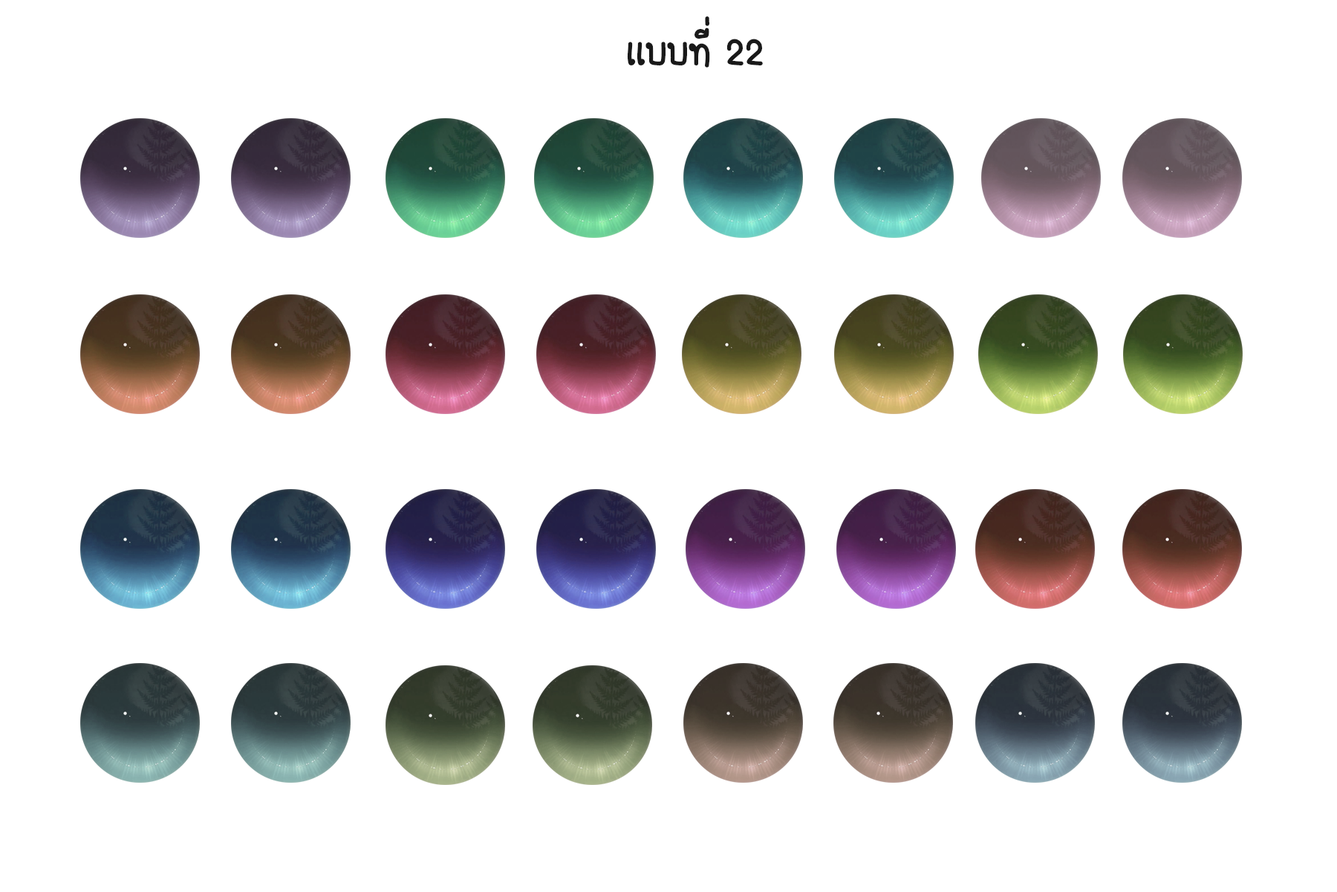
<style>
.page{position:relative;width:1337px;height:892px;background:#ffffff}
.page>*{position:absolute;margin:0}
.t1{font:55.7px "FCDaisyRegular";color:#191919}
</style>
<div class="page">
<p class="t1" style="left:627px;top:16px;width:136px;height:52px">เเบบที่ 22</p>
</div>
